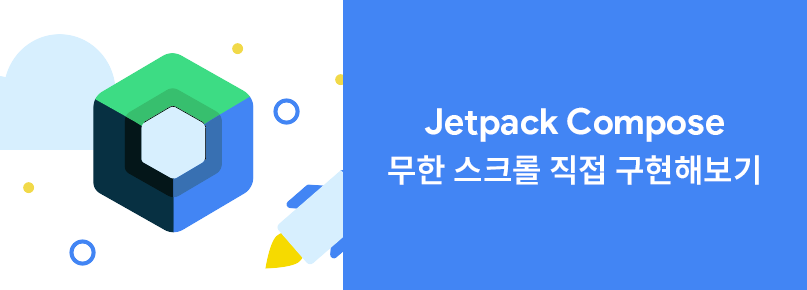
<style>
.page{position:relative;width:807px;height:290px;background:#4285f4}
.page>*{position:absolute;margin:0}
.t1{font:36px/48px "ProductSans-Bold";color:#ffffff}
.t2{font:32px/48px "NotoSansKR-SemiBold";color:#ffffff}
</style>
<div class="page">
<p class="t1" style="left:388px;top:107px;width:371px;height:78px;text-align:center">Jetpack Compose<br><span class="t2">무한 스크롤 직접 구현해보기</span></p>
</div>
